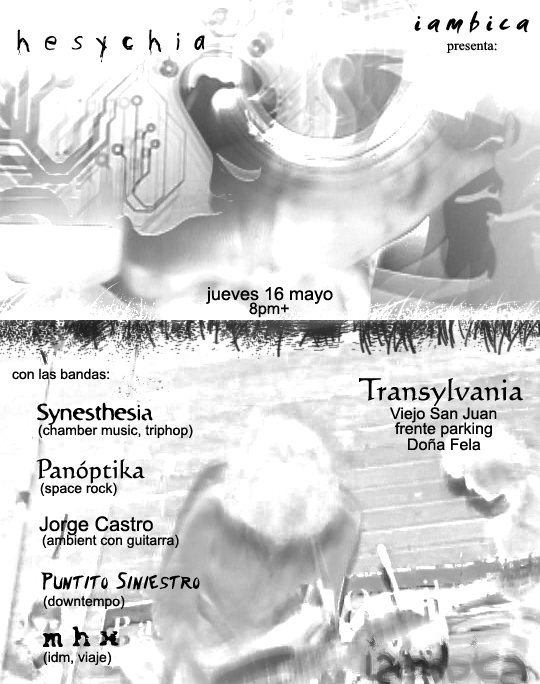
<style>
.page{position:relative;width:540px;height:684px;background:#ffffff}
.page>*{position:absolute;margin:0}
.t1{font:30px "SmudgerLetPlain";color:#000000}
.t2{font:28px "Psycho-Poetry-Regular";color:#000000}
.t3{font:14px "TimesNewRomanPSMT";color:#000000}
.t4{font:18px "ArialMT";color:#000000}
.t5{font:16px "ArialMT";color:#000000}
.t6{font:14px "ArialMT";color:#000000}
.t7{font:30px "Calligraphic421BT-RomanB";color:#000000}
.t8{font:24px "Bastard";color:#000000}
.t9{font:26px "Calligraphic421BT-RomanB";color:#000000}
.t10{font:20px "ArialMT";color:#000000}
.t11{font:22px "Shoryuken";color:#000000}
.t12{font:26px "SmashTrialVersion";color:#000000}
</style>
<div class="page">
<p class="t1" style="left:414px;top:11px;width:115px;height:23px">i a m b i c a</p>
<p class="t2" style="left:17px;top:29px;width:188px;height:34px">h e s y c h i a</p>
<p class="t3" style="left:446px;top:41px;width:51px;height:12px">presenta:</p>
<p class="t4" style="left:206px;top:287px;width:127px;height:17px">jueves 16 mayo</p>
<p class="t5" style="left:249px;top:302px;width:40px;height:16px">8pm+</p>
<p class="t6" style="left:12px;top:368px;width:97px;height:12px">con las bandas:</p>
<p class="t7" style="left:359px;top:378px;width:165px;height:28px">Transylvania</p>
<p class="t8" style="left:37px;top:402px;width:116px;height:23px">Synesthesia</p>
<p class="t5" style="left:390px;top:407px;width:107px;height:16px">Viejo San Juan</p>
<p class="t6" style="left:38px;top:424px;width:155px;height:14px">(chamber music, triphop)</p>
<p class="t5" style="left:395px;top:422px;width:97px;height:16px">frente parking</p>
<p class="t5" style="left:408px;top:438px;width:73px;height:13px">Doña Fela</p>
<p class="t9" style="left:36px;top:458px;width:109px;height:26px">Panóptika</p>
<p class="t6" style="left:40px;top:482px;width:77px;height:14px">(space rock)</p>
<p class="t10" style="left:39px;top:516px;width:114px;height:20px">Jorge Castro</p>
<p class="t6" style="left:42px;top:534px;width:137px;height:14px">(ambient con guitarra)</p>
<p class="t11" style="left:41px;top:572px;width:159px;height:19px">Puntito Siniestro</p>
<p class="t6" style="left:43px;top:595px;width:82px;height:14px">(downtempo)</p>
<p class="t12" style="left:42px;top:626px;width:77px;height:21px">m h x</p>
<p class="t6" style="left:43px;top:651px;width:68px;height:14px">(idm, viaje)</p>
</div>
